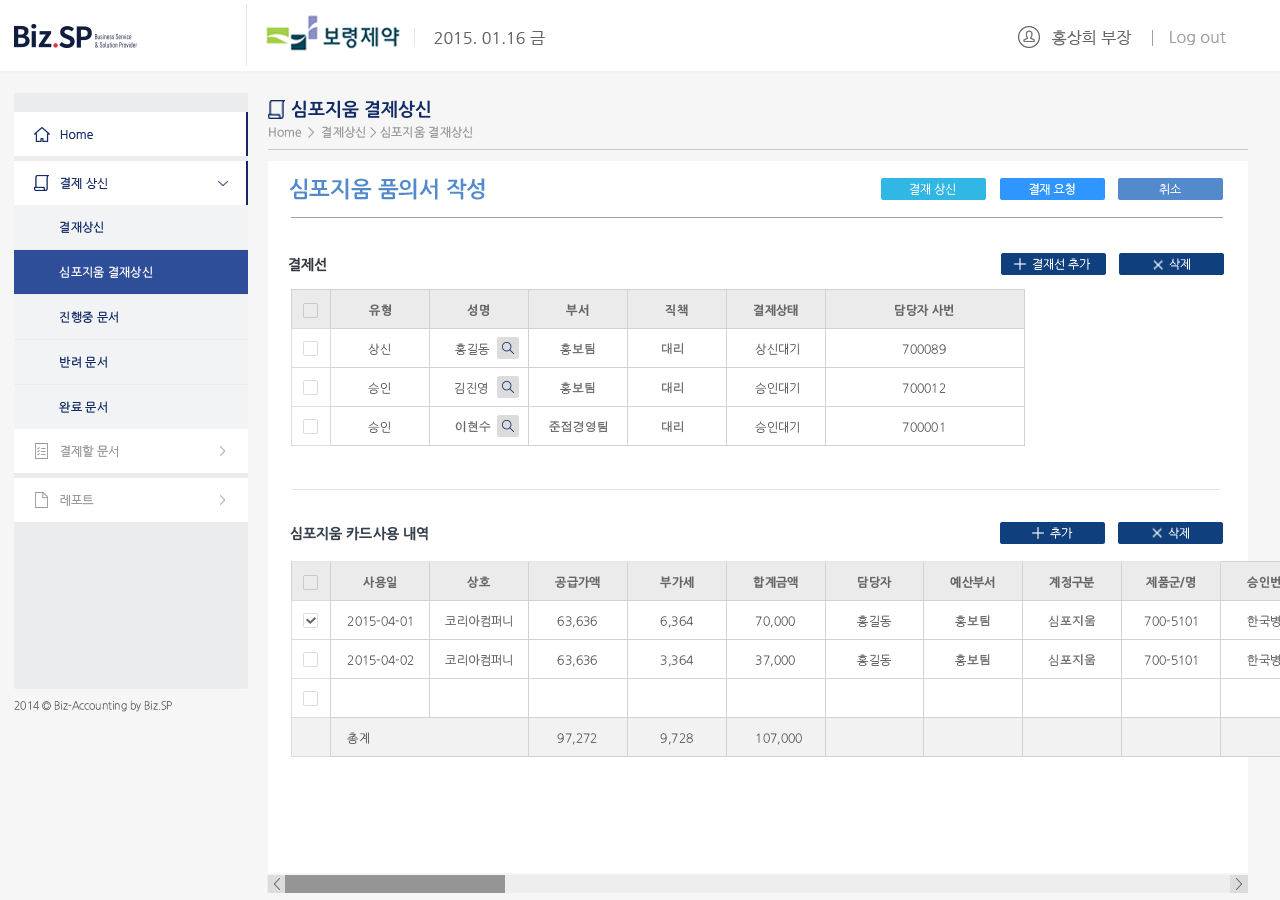
<style>
.page{position:relative;width:1280px;height:900px;background:#ffffff}
.page>*{position:absolute;margin:0}
.t1{font:16px "NanumGothic";color:#666666}
.t2{font:16px "NanumGothic";color:#a0a0a0}
.t3{font:18px "NanumGothicOTFBold";color:#122b66}
.t4{font:12px "NanumGothicOTF";color:#999999}
.t5{font:12px "NanumGothic";color:#122b66}
.t6{font:22px "NanumGothicOTFBold";color:#528acc}
.t7{font:12px "NanumGothicOTFLight";letter-spacing:-0.025em;color:#ffffff}
.t8{font:12px "NanumGothic";letter-spacing:-0.025em;color:#ffffff}
.t9{font:12px "NanumGothicOTF";color:#122b66}
.t10{font:14px "NanumGothicOTFBold";color:#34373d}
.t11{font:12px "NanumGothicOTF";color:#ffffff}
.t12{font:12px "NanumGothicOTFBold";color:#666666}
.t13{font:12px "NanumGothicOTFLight";color:#666666}
.t14{font:12px "AppleGothic";color:#666666}
.t15{font:12px "NanumGothic";color:#999999}
.t16{font:14px "NanumGothicOTFBold";color:#38424e}
.t17{font:11px "NanumGothicOTFLight";color:#6c6d6d;scale:0.94 1}
</style>
<div class="page">
<p class="t1" style="left:1052px;top:30px;width:80px;height:16px">홍상희 부장</p>
<p class="t1" style="left:434px;top:31px;width:111px;height:14px">2015. 01.16 금</p>
<p class="t2" style="left:1170px;top:31px;width:56px;height:14px">Log out</p>
<p class="t3" style="left:291px;top:100px;width:140px;height:18px">심포지움 결제상신</p>
<p class="t4" style="left:269px;top:126px;width:204px;height:12px">Home  &gt;  결제상신 &gt; 심포지움 결재상신</p>
<p class="t5" style="left:60px;top:130px;width:33px;height:9px">Home</p>
<p class="t5" style="left:60px;top:130px;width:33px;height:9px">Home</p>
<p class="t5" style="left:60px;top:177px;width:48px;height:12px">결제 상신</p>
<p class="t6" style="left:290px;top:178px;width:195px;height:22px">심포지움 품의서 작성</p>
<p class="t7" style="left:910px;top:183px;width:46px;height:12px">결재 상신</p>
<p class="t8" style="left:1029px;top:183px;width:46px;height:12px">결재 요청</p>
<p class="t7" style="left:1159px;top:183px;width:22px;height:12px">취소</p>
<p class="t9" style="left:60px;top:221px;width:44px;height:12px">결재상신</p>
<p class="t10" style="left:289px;top:257px;width:38px;height:15px">결제선</p>
<p class="t11" style="left:59px;top:266px;width:94px;height:12px">심포지움 결재상신</p>
<p class="t7" style="left:1033px;top:258px;width:58px;height:12px">결재선 추가</p>
<p class="t7" style="left:1169px;top:258px;width:21px;height:12px">삭제</p>
<p class="t12" style="left:369px;top:304px;width:22px;height:12px">유형</p>
<p class="t12" style="left:467px;top:304px;width:23px;height:12px">성명</p>
<p class="t12" style="left:566px;top:304px;width:23px;height:12px">부서</p>
<p class="t12" style="left:665px;top:304px;width:23px;height:12px">직책</p>
<p class="t12" style="left:753px;top:304px;width:45px;height:12px">결제상태</p>
<p class="t12" style="left:895px;top:304px;width:59px;height:12px">담당자 사번</p>
<p class="t9" style="left:59px;top:311px;width:59px;height:12px">진행중 문서</p>
<p class="t13" style="left:368px;top:343px;width:23px;height:12px">상신</p>
<p class="t13" style="left:455px;top:343px;width:34px;height:12px">홍길동</p>
<p class="t14" style="left:560px;top:343px;width:35px;height:12px"><span class="t13">홍</span>보팀</p>
<p class="t14" style="left:662px;top:343px;width:21px;height:12px">대리</p>
<p class="t13" style="left:755px;top:343px;width:44px;height:12px">상신대기</p>
<p class="t13" style="left:902px;top:344px;width:44px;height:10px">700089</p>
<p class="t9" style="left:60px;top:356px;width:47px;height:12px">반려 문서</p>
<p class="t13" style="left:368px;top:382px;width:22px;height:12px">승인</p>
<p class="t13" style="left:455px;top:382px;width:32px;height:12px">김진영</p>
<p class="t14" style="left:560px;top:382px;width:35px;height:12px"><span class="t13">홍</span>보팀</p>
<p class="t14" style="left:662px;top:382px;width:21px;height:12px">대리</p>
<p class="t13" style="left:755px;top:382px;width:44px;height:12px">승인대기</p>
<p class="t13" style="left:902px;top:383px;width:44px;height:10px">700012</p>
<p class="t9" style="left:59px;top:401px;width:48px;height:12px">완료 문서</p>
<p class="t13" style="left:368px;top:421px;width:22px;height:12px">승인</p>
<p class="t14" style="left:455px;top:421px;width:36px;height:12px">이현수</p>
<p class="t14" style="left:549px;top:421px;width:58px;height:12px">준접경영팀</p>
<p class="t14" style="left:662px;top:421px;width:21px;height:12px">대리</p>
<p class="t13" style="left:755px;top:421px;width:44px;height:12px">승인대기</p>
<p class="t13" style="left:902px;top:422px;width:42px;height:10px">700001</p>
<p class="t15" style="left:60px;top:445px;width:58px;height:12px">결제할 문서</p>
<p class="t15" style="left:60px;top:445px;width:58px;height:12px">결제할 문서</p>
<p class="t15" style="left:60px;top:495px;width:34px;height:11px">레포트</p>
<p class="t15" style="left:60px;top:495px;width:34px;height:11px">레포트</p>
<p class="t16" style="left:290px;top:526px;width:138px;height:15px">심포지움 카드사용 내역</p>
<p class="t7" style="left:1050px;top:527px;width:23px;height:12px">추가</p>
<p class="t7" style="left:1168px;top:527px;width:21px;height:12px">삭제</p>
<p class="t12" style="left:363px;top:576px;width:34px;height:12px">사용일</p>
<p class="t12" style="left:467px;top:576px;width:24px;height:12px">상호</p>
<p class="t12" style="left:555px;top:576px;width:45px;height:12px">공급가액</p>
<p class="t12" style="left:660px;top:576px;width:34px;height:12px">부가세</p>
<p class="t12" style="left:753px;top:576px;width:45px;height:12px">합계금액</p>
<p class="t12" style="left:858px;top:576px;width:34px;height:12px">담당자</p>
<p class="t12" style="left:950px;top:576px;width:45px;height:12px">예산부서</p>
<p class="t12" style="left:1049px;top:576px;width:46px;height:12px">계정구분</p>
<p class="t12" style="left:1146px;top:576px;width:50px;height:12px">제품군/명</p>
<p class="t13" style="left:347px;top:616px;width:65px;height:10px">2015-04-01</p>
<p class="t13" style="left:347px;top:616px;width:65px;height:10px">2015-04-01</p>
<p class="t13" style="left:445px;top:615px;width:67px;height:12px">코리<span class="t14">아</span>컴퍼니</p>
<p class="t13" style="left:557px;top:616px;width:40px;height:12px">63,636</p>
<p class="t13" style="left:557px;top:616px;width:40px;height:12px">63,636</p>
<p class="t13" style="left:660px;top:616px;width:33px;height:12px">6,363</p>
<p class="t13" style="left:660px;top:616px;width:33px;height:12px">6,364</p>
<p class="t13" style="left:755px;top:616px;width:40px;height:12px">70,000</p>
<p class="t13" style="left:755px;top:616px;width:40px;height:12px">70,000</p>
<p class="t13" style="left:857px;top:615px;width:34px;height:12px">홍길동</p>
<p class="t14" style="left:955px;top:615px;width:35px;height:12px"><span class="t13">홍</span>보팀</p>
<p class="t14" style="left:1048px;top:615px;width:48px;height:12px"><span class="t13">심</span>포지움</p>
<p class="t13" style="left:1144px;top:616px;width:53px;height:10px">700-5101</p>
<p class="t13" style="left:445px;top:654px;width:67px;height:12px">코리<span class="t14">아</span>컴퍼니</p>
<p class="t13" style="left:857px;top:654px;width:34px;height:12px">홍길동</p>
<p class="t14" style="left:955px;top:654px;width:35px;height:12px"><span class="t13">홍</span>보팀</p>
<p class="t14" style="left:1048px;top:654px;width:48px;height:12px"><span class="t13">심</span>포지움</p>
<p class="t13" style="left:347px;top:655px;width:65px;height:10px">2015-04-01</p>
<p class="t13" style="left:347px;top:655px;width:67px;height:10px">2015-04-02</p>
<p class="t13" style="left:557px;top:655px;width:40px;height:12px">63,636</p>
<p class="t13" style="left:557px;top:655px;width:40px;height:12px">63,636</p>
<p class="t13" style="left:660px;top:655px;width:33px;height:12px">6,363</p>
<p class="t13" style="left:660px;top:655px;width:33px;height:12px">3,364</p>
<p class="t13" style="left:755px;top:655px;width:40px;height:12px">70,000</p>
<p class="t13" style="left:755px;top:655px;width:40px;height:12px">37,000</p>
<p class="t13" style="left:1144px;top:655px;width:53px;height:10px">700-5101</p>
<p class="t17" style="left:14px;top:700px;width:158px;height:12px">2014 © Biz-Accounting by Biz.SP</p>
<p class="t13" style="left:347px;top:732px;width:22px;height:12px">총계</p>
<p class="t13" style="left:557px;top:733px;width:40px;height:12px">97,272</p>
<p class="t13" style="left:660px;top:733px;width:33px;height:12px">9,728</p>
<p class="t13" style="left:756px;top:733px;width:46px;height:12px">107,000</p>
</div>
